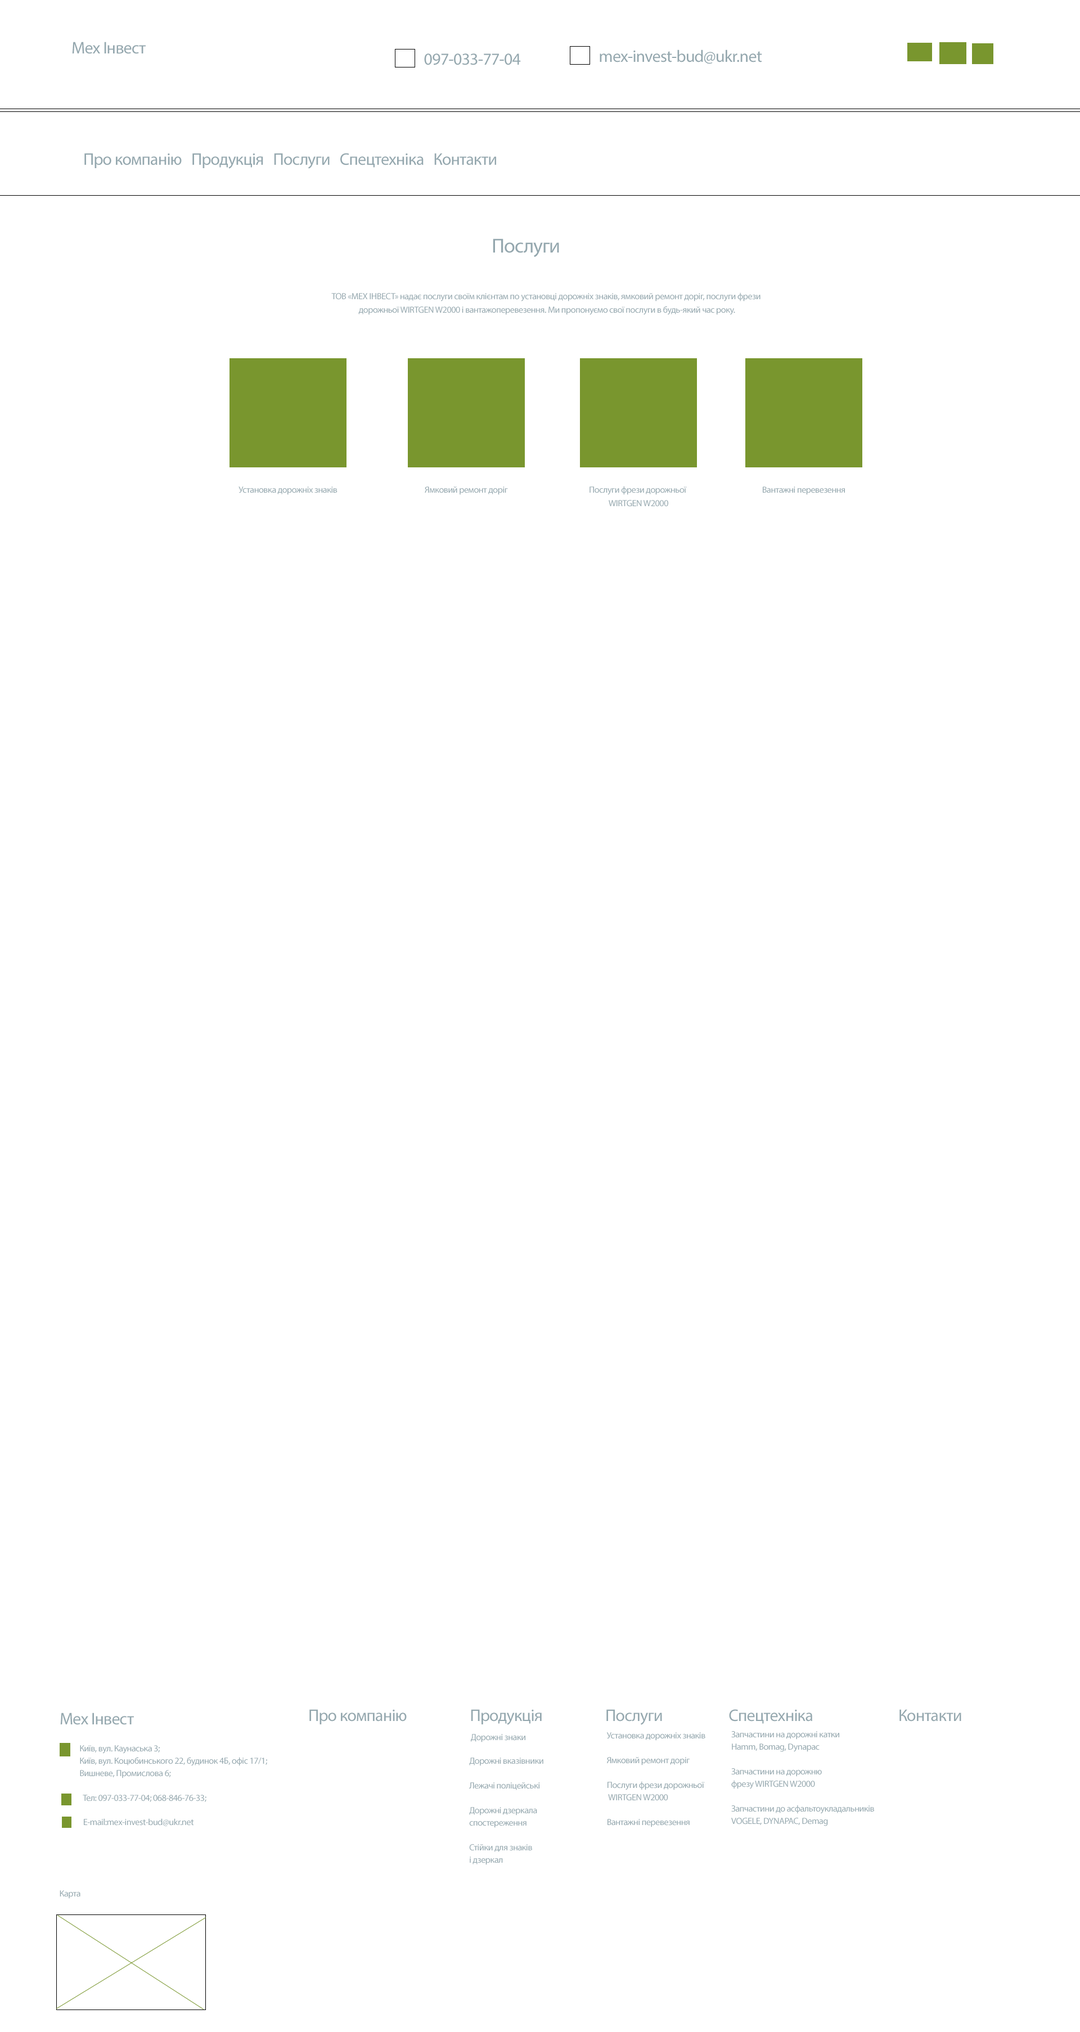
<style>
.page{position:relative;width:1080px;height:2032px;background:#ffffff}
.page>*{position:absolute;margin:0}
.t1{font:16.9px "MyriadPro-Regular";letter-spacing:-0.025em;color:#94a7ae}
.t2{font:20.2px "MyriadPro-Regular";letter-spacing:-0.025em;color:#94a7ae}
.t3{font:9px/13.5px "MyriadPro-Regular";letter-spacing:-0.025em;color:#94a7ae}
.t4{font:9px "MyriadPro-Regular";letter-spacing:-0.025em;color:#94a7ae}
.t5{font:9px/12.4px "MyriadPro-Regular";letter-spacing:-0.025em;color:#94a7ae}
</style>
<div class="page">
<p class="t1" style="left:72px;top:42px;width:74px;height:12px">Мех Інвест</p>
<p class="t1" style="left:424px;top:53px;width:97px;height:12px">097-033-77-04</p>
<p class="t1" style="left:600px;top:50px;width:162px;height:14px">mex-invest-bud@ukr.net</p>
<p class="t1" style="left:84px;top:153px;width:412px;height:16px">Про компанію   Продукція   Послуги   Спецтехніка   Контакти</p>
<p class="t2" style="left:493px;top:238px;width:66px;height:19px">Послуги</p>
<p class="t3" style="left:331px;top:292px;width:429px;height:23px;text-align:center">ТОВ «МЕХ ІНВЕСТ» надає послуги своїм клієнтам по установці дорожніх знаків, ямковий ремонт доріг, послуги фрези<br> дорожньої WIRTGEN W2000 і вантажоперевезення. Ми пропонуємо свої послуги в будь-який час року.</p>
<p class="t3" style="left:590px;top:486px;width:97px;height:21px;text-align:center">Послуги фрези дорожньої <br>WIRTGEN W2000</p>
<p class="t4" style="left:238px;top:487px;width:100px;height:8px">Установка дорожніх знаків</p>
<p class="t4" style="left:425px;top:487px;width:83px;height:8px">Ямковий ремонт доріг</p>
<p class="t4" style="left:763px;top:487px;width:82px;height:8px">Вантажні перевезення</p>
<p class="t1" style="left:309px;top:1709px;width:652px;height:16px">Про компанію                    Продукція                    Послуги                     Спецтехніка                           Контакти</p>
<p class="t1" style="left:60px;top:1713px;width:74px;height:12px">Мех Інвест</p>
<p class="t5" style="left:606px;top:1732px;width:99px;height:96px">Установка дорожніх знаків<br><br>Ямковий ремонт доріг<br><br>Послуги фрези дорожньої<br> WIRTGEN W2000<br><br>Вантажні перевезення</p>
<p class="t5" style="left:731px;top:1731px;width:143px;height:95px">Запчастини на дорожні катки <br>Hamm, Bomag, Dynapac<br><br>Запчастини на дорожню <br>фрезу WIRTGEN W2000<br><br>Запчастини до асфальтоукладальників <br>VOGELE, DYNAPAC, Demag</p>
<p class="t5" style="left:80px;top:1745px;width:187px;height:34px">Київ, вул. Каунаська 3; <br>Київ, вул. Коцюбинського 22, будинок 4Б, офіс 17/1; <br>Вишневе, Промислова 6;</p>
<p class="t4" style="left:471px;top:1734px;width:54px;height:9px">Дорожні знаки</p>
<p class="t5" style="left:469px;top:1758px;width:74px;height:107px">Дорожні вказівники<br><br>Лежачі поліцейські<br><br>Дорожні дзеркала <br>спостереження<br><br>Стійки для знаків <br>і дзеркал</p>
<p class="t4" style="left:83px;top:1795px;width:123px;height:7px">Тел: 097-033-77-04; 068-846-76-33;</p>
<p class="t4" style="left:84px;top:1819px;width:110px;height:7px">E-mail:mex-invest-bud@ukr.net</p>
<p class="t4" style="left:60px;top:1891px;width:20px;height:8px">Карта</p>
</div>
